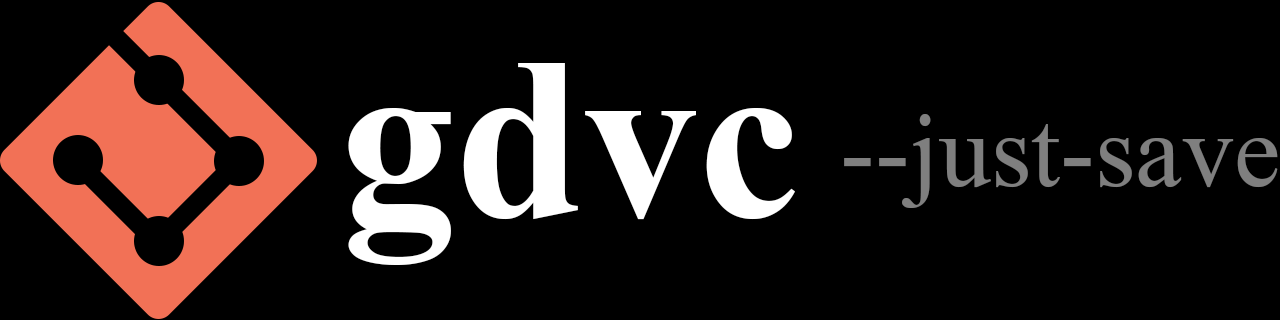
<style>
.page{position:relative;width:1280px;height:320px;background:#000000}
.page>*{position:absolute;margin:0}
.t1{font:230.4px "TimesNewRomanPS-BoldMT";color:#ffffff}
.t2{font:104.2px "TimesNewRomanPSMT";color:#7f7f7f}
</style>
<div class="page">
<p class="t1" style="left:348px;top:63px;width:447px;height:202px">gdvc</p>
<p class="t2" style="left:844px;top:114px;width:434px;height:94px">--just-save</p>
</div>
